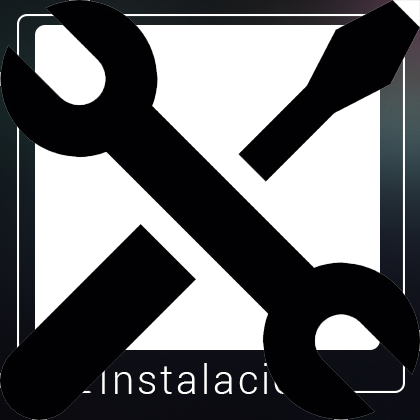
<style>
.page{position:relative;width:420px;height:420px;background:#ffffff}
.page>*{position:absolute;margin:0}
.t1{font:40.1px "Roboto-Light";letter-spacing:0.075em;color:#ffffff}
</style>
<div class="page">
<p class="t1" style="left:102px;top:363px;width:217px;height:31px">Instalación</p>
</div>
